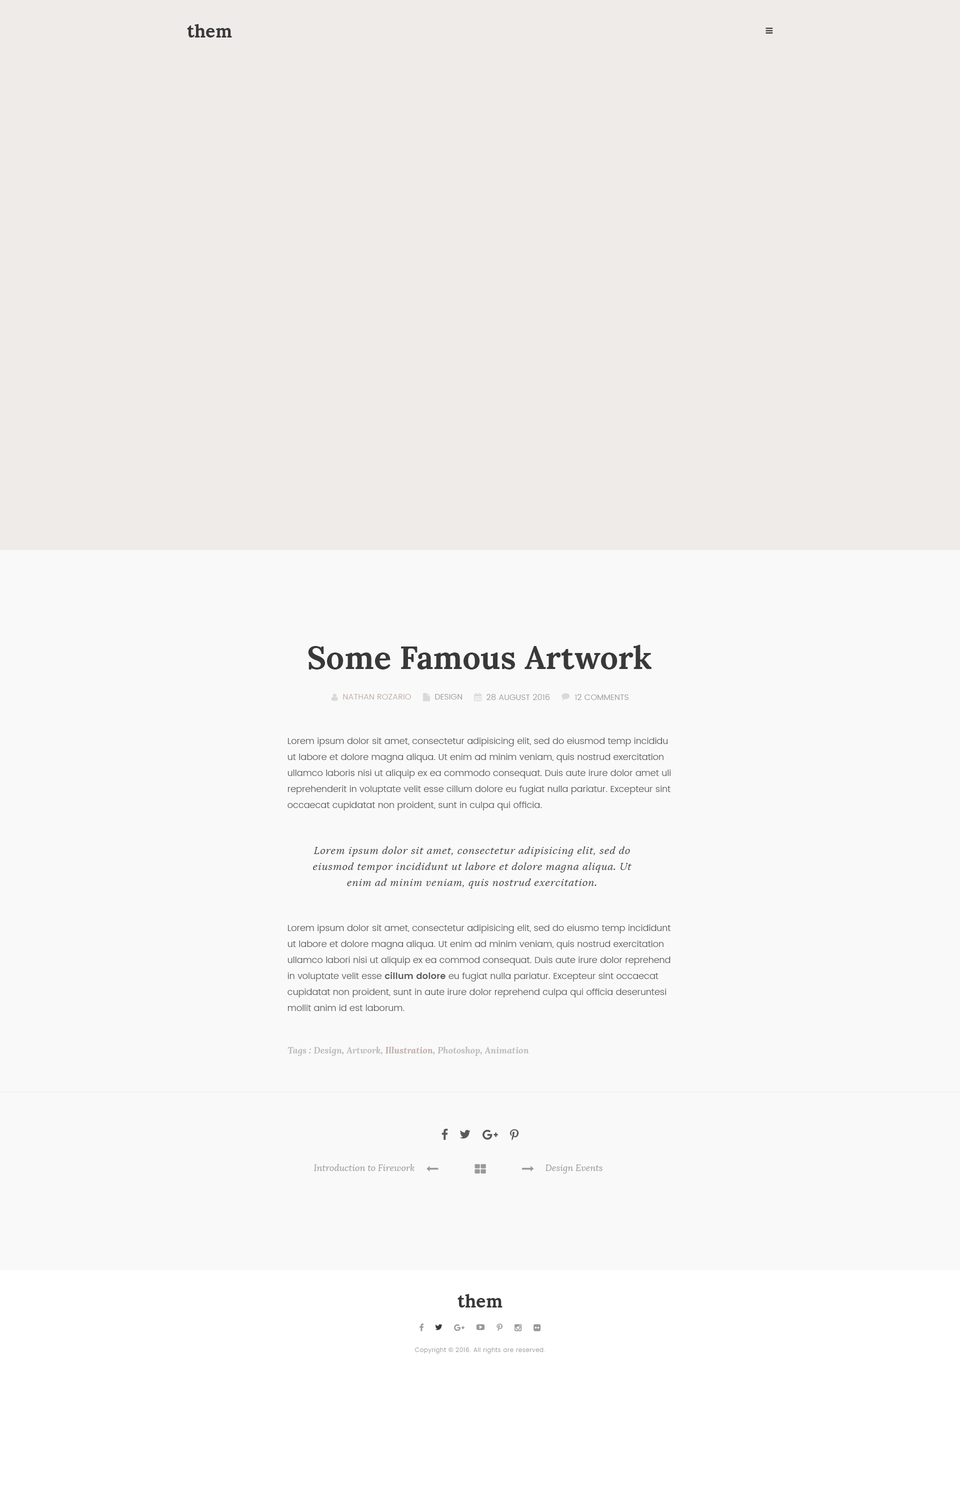
<style>
.page{position:relative;width:960px;height:1500px;background:#f9f9f9}
.page>*{position:absolute;margin:0}
.t1{font:18px "Lora-Bold";color:#393939}
.t2{font:32px "Lora-Bold";color:#393939}
.t3{font:8px "Poppins-Light";letter-spacing:0.01em;color:#bcaaa4;text-transform:uppercase}
.t4{font:8px "Poppins-Light";letter-spacing:0.01em;color:#999999;text-transform:uppercase}
.t5{font:9px/16px "Poppins-Light";color:#595959}
.t6{font:10px/16px "Lora-Italic";letter-spacing:0.05em;color:#393939;font-style:italic}
.t7{font:9px/16px "Poppins-SemiBold";color:#595959}
.t8{font:9px "Lora-BoldItalic";color:#b9b9b9}
.t9{font:9px "Lora-BoldItalic";color:#bcaaa4}
.t10{font:9px "Lora-Italic";color:#999999}
.t11{font:6px "Poppins-Light";letter-spacing:0.05em;color:#999999}
.t12{font:6px "OpenSans";letter-spacing:0.05em;color:#999999}
</style>
<div class="page">
<p class="t1" style="left:187px;top:24px;width:45px;height:14px">them</p>
<p class="t2" style="left:308px;top:644px;width:344px;height:26px">Some Famous Artwork</p>
<p class="t3" style="left:343px;top:694px;width:68px;height:6px">Nathan Rozario</p>
<p class="t4" style="left:435px;top:694px;width:27px;height:6px">Design</p>
<p class="t4" style="left:486px;top:694px;width:64px;height:6px">28 August 2016</p>
<p class="t4" style="left:575px;top:694px;width:53px;height:6px">12 Comments</p>
<p class="t5" style="left:288px;top:738px;width:383px;height:72px">Lorem ipsum dolor sit amet, consectetur adipisicing elit, sed do eiusmod temp incididu ut labore et dolore magna aliqua. Ut enim ad minim veniam, quis nostrud exercitation ullamco laboris nisi ut aliquip ex ea commodo consequat. Duis aute irure dolor amet uli reprehenderit in voluptate velit esse cillum dolore eu fugiat nulla pariatur. Excepteur sint occaecat cupidatat non proident, sunt in culpa qui officia.</p>
<p class="t6" style="left:313px;top:846px;width:319px;height:42px;text-align:center">Lorem ipsum dolor sit amet, consectetur adipisicing elit, sed do eiusmod tempor incididunt ut labore et dolore magna aliqua. Ut enim ad minim veniam, quis nostrud exercitation.</p>
<p class="t5" style="left:288px;top:924px;width:383px;height:87px">Lorem ipsum dolor sit amet, consectetur adipisicing elit, sed do eiusmo temp incididunt ut labore et dolore magna aliqua. Ut enim ad minim veniam, quis nostrud exercitation ullamco labori nisi ut aliquip ex ea commod consequat. Duis aute irure dolor reprehend in voluptate velit esse <span class="t7">cillum dolore</span> eu fugiat nulla pariatur. Excepteur sint occaecat cupidatat non proident, sunt in aute irure dolor reprehend culpa qui officia deseruntesi mollit anim id est laborum.</p>
<p class="t8" style="left:288px;top:1046px;width:241px;height:10px">Tags : Design, Artwork, <span class="t9">Illustration</span>, Photoshop, Animation</p>
<p class="t10" style="left:314px;top:1164px;width:100px;height:7px">Introduction to Firework</p>
<p class="t10" style="left:546px;top:1164px;width:56px;height:10px">Design Events</p>
<p class="t1" style="left:458px;top:1294px;width:44px;height:14px">them</p>
<p class="t11" style="left:415px;top:1348px;width:130px;height:6px">Copyright <span class="t12">© </span>2016. All rights are reserved.</p>
</div>
